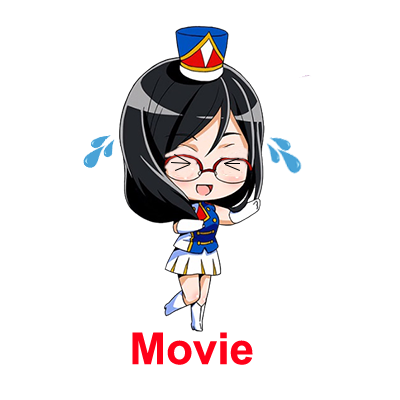
<style>
.page{position:relative;width:400px;height:400px;background:#ffffff}
.page>*{position:absolute;margin:0}
.t1{font:44px "Arial-BoldMT";color:#ff0018}
</style>
<div class="page">
<p class="t1" style="left:132px;top:332px;width:121px;height:33px">Movie</p>
</div>
